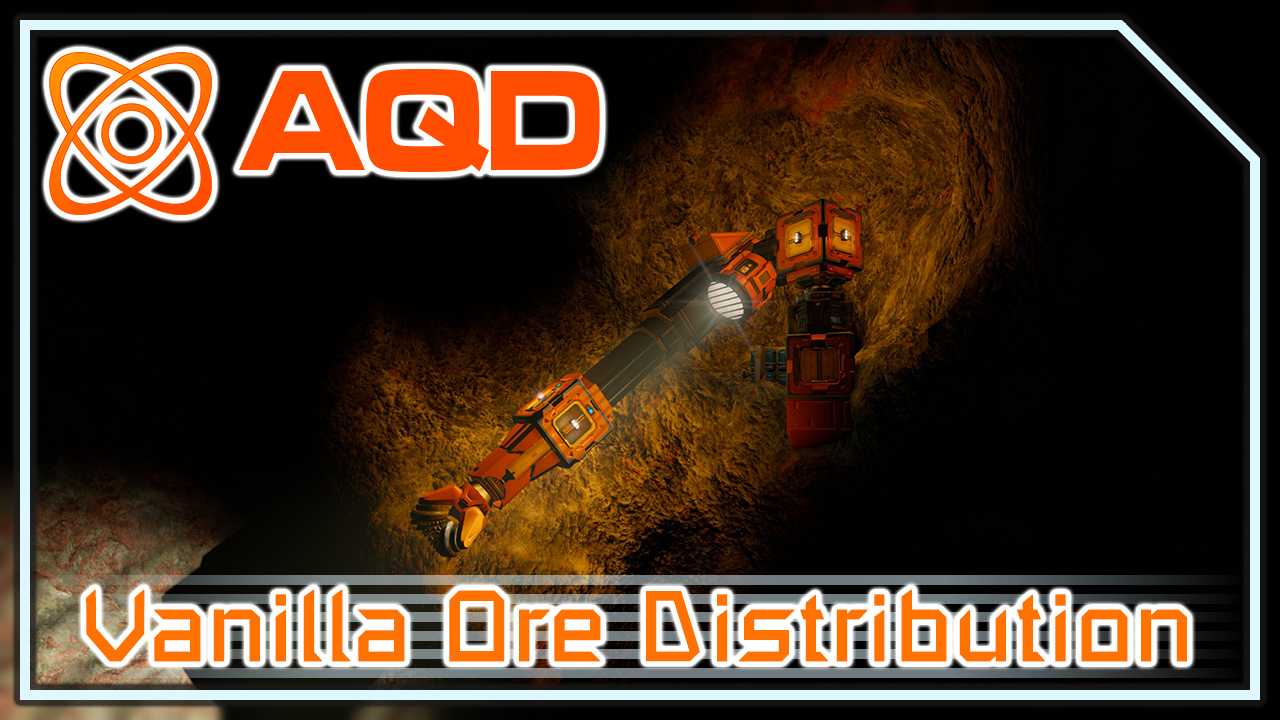
<style>
.page{position:relative;width:1280px;height:720px;background:#000000}
.page>*{position:absolute;margin:0}
.t1{font:148.7px "MicrogrammaD-BoldExte";color:#ff4e00;scale:0.83 1}
.t2{font:99px "SpaceEngineers";color:#ff7200;font-weight:bold}
</style>
<div class="page">
<p class="t1" style="left:238px;top:69px;width:362px;height:104px">AQD</p>
<p class="t2" style="left:86px;top:589px;width:1101px;height:73px">Vanilla Ore Distribution</p>
</div>
